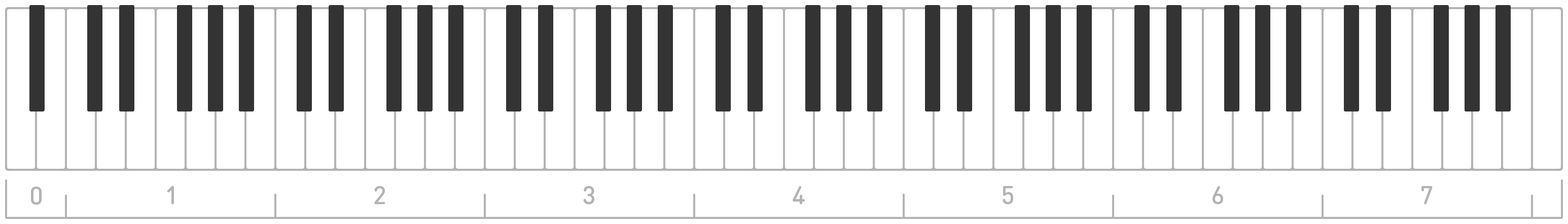
<style>
.page{position:relative;width:1568px;height:224px;background:#ffffff}
.page>*{position:absolute;margin:0}
.t1{font:25.4px "DINRoundPro-Medi";color:#b3b3b3}
</style>
<div class="page">
<p class="t1" style="left:31px;top:187px;width:11px;height:18px">0</p>
<p class="t1" style="left:167px;top:186px;width:7px;height:18px">1</p>
<p class="t1" style="left:374px;top:186px;width:11px;height:18px">2</p>
<p class="t1" style="left:583px;top:186px;width:11px;height:18px">3</p>
<p class="t1" style="left:793px;top:186px;width:12px;height:18px">4</p>
<p class="t1" style="left:1003px;top:186px;width:10px;height:18px">5</p>
<p class="t1" style="left:1213px;top:186px;width:10px;height:18px">6</p>
<p class="t1" style="left:1421px;top:186px;width:12px;height:18px">7</p>
</div>
